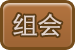
<style>
.page{position:relative;width:75px;height:50px}
.page>*{position:absolute;margin:0}
.t1{font:24.1px "STHeitiSC-Light";color:#e3d4ca;scale:1.03 1}
</style>
<div class="page">
<p class="t1" style="left:13px;top:13px;width:49px;height:24px">组会</p>
</div>
